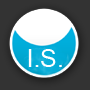
<style>
.page{position:relative;width:90px;height:90px;background:#333333}
.page>*{position:absolute;margin:0}
.t1{font:25px "ArialMT";color:#ffffff}
</style>
<div class="page">
<p class="t1" style="left:28px;top:49px;width:34px;height:18px">I.S.</p>
</div>
